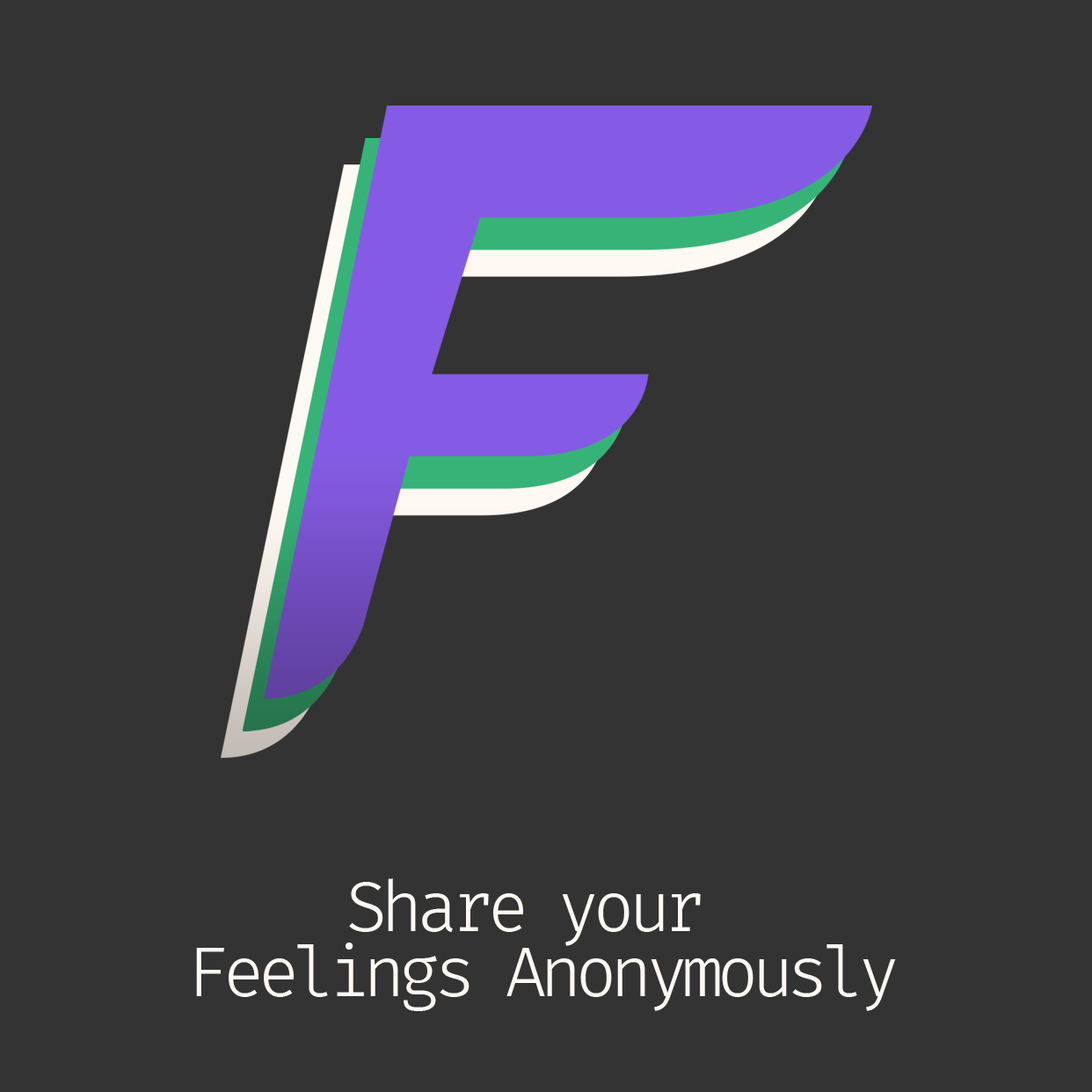
<style>
.page{position:relative;width:1092px;height:1092px;background:#333333}
.page>*{position:absolute;margin:0}
.t1{font:68.5px/21.7px "FiraCode-Light";letter-spacing:-0.1em;color:#fff8f3}
</style>
<div class="page">
<p class="t1" style="left:196px;top:878px;width:700px;height:133px;text-align:center">Share your <br><br><br>Feelings Anonymously</p>
</div>
